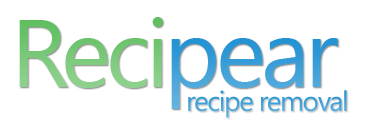
<style>
.page{position:relative;width:377px;height:132px;background:#ffffff}
.page>*{position:absolute;margin:0}
.t1{font:96px "SegoeUI";letter-spacing:-0.05em;color:#5fbe5f}
.t2{font:96px "SegoeUI";letter-spacing:-0.05em;color:#2393d3}
.t3{font:28px "SegoeUI";letter-spacing:-0.05em;color:#2393d3}
</style>
<div class="page">
<p class="t1" style="left:19px;top:17px;width:144px;height:71px">Reci</p>
<p class="t2" style="left:171px;top:38px;width:167px;height:71px">pear</p>
<p class="t3" style="left:188px;top:90px;width:159px;height:28px">recipe removal</p>
</div>
